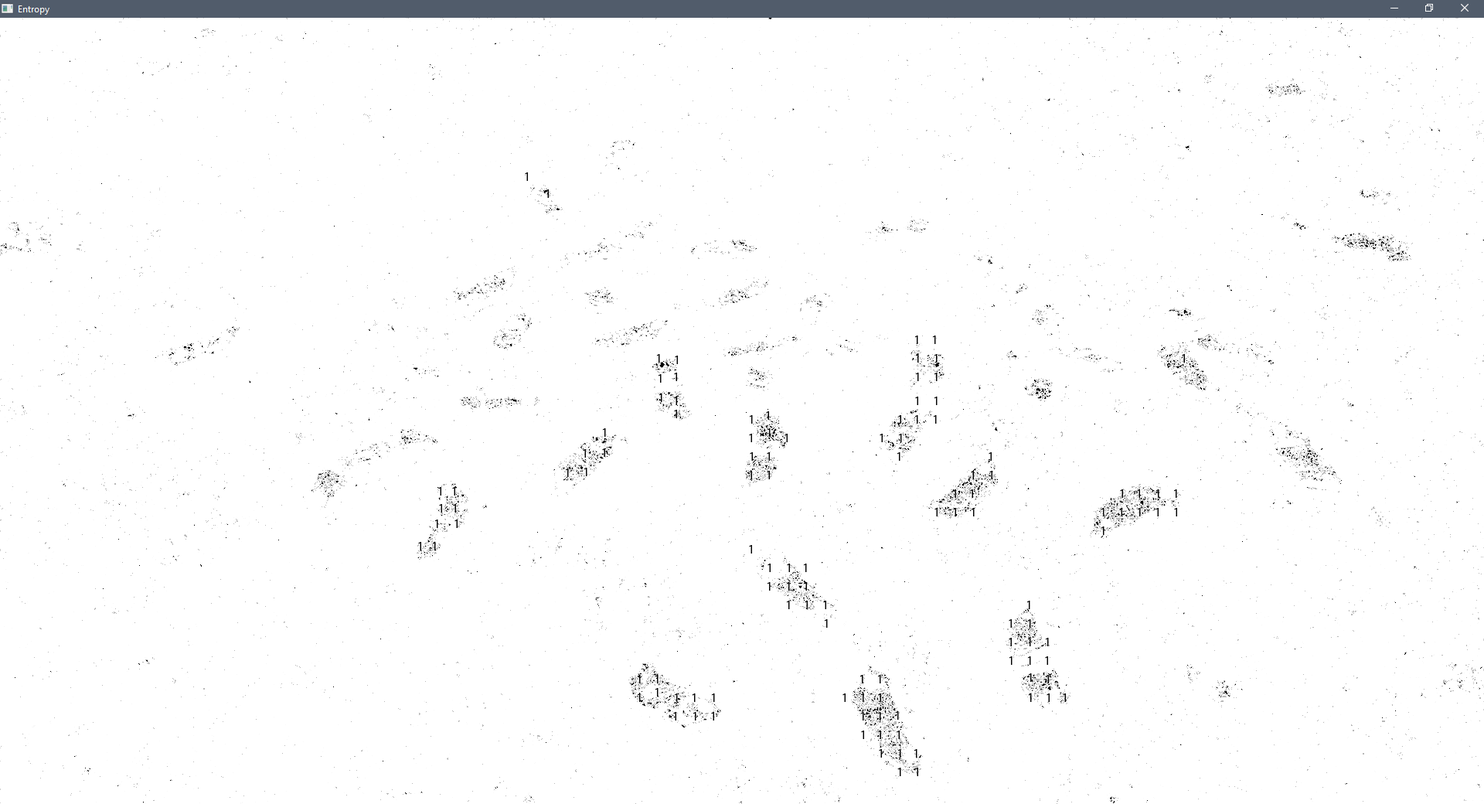
<style>
.page{position:relative;width:1484px;height:804px;background:#ffffff}
.page>*{position:absolute;margin:0}
.t1{font:12.4px "MyriadPro-Regular";color:#000000}
</style>
<div class="page">
<p class="t1" style="left:525px;top:172px;width:3px;height:9px">1</p>
<p class="t1" style="left:546px;top:189px;width:3px;height:9px">1</p>
<p class="t1" style="left:915px;top:335px;width:3px;height:9px">1</p>
<p class="t1" style="left:933px;top:335px;width:3px;height:9px">1</p>
<p class="t1" style="left:657px;top:354px;width:3px;height:8px">1</p>
<p class="t1" style="left:916px;top:354px;width:3px;height:8px">1</p>
<p class="t1" style="left:934px;top:354px;width:3px;height:8px">1</p>
<p class="t1" style="left:675px;top:355px;width:3px;height:9px">1</p>
<p class="t1" style="left:658px;top:374px;width:3px;height:9px">1</p>
<p class="t1" style="left:674px;top:372px;width:3px;height:9px">1</p>
<p class="t1" style="left:916px;top:372px;width:3px;height:9px">1</p>
<p class="t1" style="left:934px;top:372px;width:3px;height:9px">1</p>
<p class="t1" style="left:659px;top:393px;width:3px;height:9px">1</p>
<p class="t1" style="left:674px;top:396px;width:3px;height:9px">1</p>
<p class="t1" style="left:915px;top:396px;width:3px;height:9px">1</p>
<p class="t1" style="left:934px;top:396px;width:3px;height:9px">1</p>
<p class="t1" style="left:674px;top:410px;width:3px;height:8px">1</p>
<p class="t1" style="left:766px;top:411px;width:3px;height:9px">1</p>
<p class="t1" style="left:750px;top:415px;width:3px;height:8px">1</p>
<p class="t1" style="left:898px;top:415px;width:3px;height:8px">1</p>
<p class="t1" style="left:915px;top:415px;width:3px;height:8px">1</p>
<p class="t1" style="left:934px;top:415px;width:3px;height:8px">1</p>
<p class="t1" style="left:603px;top:428px;width:3px;height:9px">1</p>
<p class="t1" style="left:749px;top:434px;width:3px;height:8px">1</p>
<p class="t1" style="left:767px;top:428px;width:3px;height:9px">1</p>
<p class="t1" style="left:784px;top:434px;width:3px;height:8px">1</p>
<p class="t1" style="left:879px;top:434px;width:4px;height:8px">1</p>
<p class="t1" style="left:899px;top:434px;width:3px;height:8px">1</p>
<p class="t1" style="left:583px;top:449px;width:3px;height:8px">1</p>
<p class="t1" style="left:602px;top:448px;width:3px;height:9px">1</p>
<p class="t1" style="left:750px;top:452px;width:3px;height:9px">1</p>
<p class="t1" style="left:767px;top:452px;width:3px;height:9px">1</p>
<p class="t1" style="left:897px;top:452px;width:3px;height:9px">1</p>
<p class="t1" style="left:988px;top:452px;width:3px;height:9px">1</p>
<p class="t1" style="left:566px;top:468px;width:3px;height:9px">1</p>
<p class="t1" style="left:584px;top:468px;width:3px;height:8px">1</p>
<p class="t1" style="left:749px;top:471px;width:3px;height:8px">1</p>
<p class="t1" style="left:767px;top:471px;width:3px;height:8px">1</p>
<p class="t1" style="left:971px;top:471px;width:3px;height:8px">1</p>
<p class="t1" style="left:989px;top:471px;width:3px;height:8px">1</p>
<p class="t1" style="left:438px;top:487px;width:17px;height:8px">1   1</p>
<p class="t1" style="left:953px;top:489px;width:3px;height:9px">1</p>
<p class="t1" style="left:970px;top:489px;width:3px;height:9px">1</p>
<p class="t1" style="left:1120px;top:489px;width:3px;height:9px">1</p>
<p class="t1" style="left:1137px;top:489px;width:3px;height:9px">1</p>
<p class="t1" style="left:1156px;top:489px;width:3px;height:9px">1</p>
<p class="t1" style="left:1174px;top:489px;width:3px;height:9px">1</p>
<p class="t1" style="left:439px;top:504px;width:17px;height:8px">1   1</p>
<p class="t1" style="left:934px;top:508px;width:3px;height:8px">1</p>
<p class="t1" style="left:953px;top:508px;width:3px;height:8px">1</p>
<p class="t1" style="left:971px;top:508px;width:3px;height:8px">1</p>
<p class="t1" style="left:1101px;top:508px;width:3px;height:8px">1</p>
<p class="t1" style="left:1119px;top:508px;width:3px;height:8px">1</p>
<p class="t1" style="left:1138px;top:508px;width:3px;height:8px">1</p>
<p class="t1" style="left:1155px;top:508px;width:3px;height:8px">1</p>
<p class="t1" style="left:1174px;top:508px;width:3px;height:8px">1</p>
<p class="t1" style="left:435px;top:519px;width:22px;height:9px">1     1</p>
<p class="t1" style="left:1101px;top:526px;width:3px;height:9px">1</p>
<p class="t1" style="left:418px;top:542px;width:18px;height:8px">1   1</p>
<p class="t1" style="left:749px;top:545px;width:3px;height:8px">1</p>
<p class="t1" style="left:767px;top:563px;width:3px;height:9px">1</p>
<p class="t1" style="left:787px;top:563px;width:3px;height:9px">1</p>
<p class="t1" style="left:804px;top:563px;width:3px;height:9px">1</p>
<p class="t1" style="left:767px;top:582px;width:3px;height:8px">1</p>
<p class="t1" style="left:787px;top:582px;width:3px;height:8px">1</p>
<p class="t1" style="left:804px;top:582px;width:3px;height:8px">1</p>
<p class="t1" style="left:787px;top:600px;width:3px;height:9px">1</p>
<p class="t1" style="left:804px;top:600px;width:4px;height:9px">1</p>
<p class="t1" style="left:823px;top:600px;width:3px;height:9px">1</p>
<p class="t1" style="left:1027px;top:600px;width:3px;height:9px">1</p>
<p class="t1" style="left:825px;top:619px;width:3px;height:8px">1</p>
<p class="t1" style="left:1008px;top:619px;width:4px;height:8px">1</p>
<p class="t1" style="left:1028px;top:619px;width:3px;height:8px">1</p>
<p class="t1" style="left:1008px;top:638px;width:4px;height:8px">1</p>
<p class="t1" style="left:1028px;top:638px;width:3px;height:8px">1</p>
<p class="t1" style="left:1046px;top:638px;width:3px;height:8px">1</p>
<p class="t1" style="left:1009px;top:656px;width:3px;height:9px">1</p>
<p class="t1" style="left:1028px;top:656px;width:3px;height:9px">1</p>
<p class="t1" style="left:1045px;top:656px;width:3px;height:9px">1</p>
<p class="t1" style="left:638px;top:675px;width:3px;height:8px">1</p>
<p class="t1" style="left:655px;top:675px;width:3px;height:8px">1</p>
<p class="t1" style="left:860px;top:675px;width:3px;height:8px">1</p>
<p class="t1" style="left:878px;top:675px;width:3px;height:8px">1</p>
<p class="t1" style="left:1029px;top:673px;width:3px;height:9px">1</p>
<p class="t1" style="left:1046px;top:675px;width:3px;height:8px">1</p>
<p class="t1" style="left:655px;top:688px;width:3px;height:8px">1</p>
<p class="t1" style="left:638px;top:693px;width:3px;height:9px">1</p>
<p class="t1" style="left:675px;top:693px;width:3px;height:9px">1</p>
<p class="t1" style="left:692px;top:693px;width:3px;height:9px">1</p>
<p class="t1" style="left:712px;top:693px;width:3px;height:9px">1</p>
<p class="t1" style="left:842px;top:693px;width:3px;height:9px">1</p>
<p class="t1" style="left:861px;top:693px;width:3px;height:9px">1</p>
<p class="t1" style="left:878px;top:693px;width:3px;height:9px">1</p>
<p class="t1" style="left:1029px;top:693px;width:3px;height:9px">1</p>
<p class="t1" style="left:1046px;top:693px;width:3px;height:9px">1</p>
<p class="t1" style="left:1063px;top:693px;width:3px;height:9px">1</p>
<p class="t1" style="left:673px;top:712px;width:3px;height:8px">1</p>
<p class="t1" style="left:693px;top:712px;width:3px;height:8px">1</p>
<p class="t1" style="left:711px;top:712px;width:3px;height:8px">1</p>
<p class="t1" style="left:861px;top:712px;width:3px;height:8px">1</p>
<p class="t1" style="left:878px;top:712px;width:3px;height:8px">1</p>
<p class="t1" style="left:896px;top:711px;width:3px;height:8px">1</p>
<p class="t1" style="left:861px;top:730px;width:3px;height:9px">1</p>
<p class="t1" style="left:878px;top:730px;width:3px;height:9px">1</p>
<p class="t1" style="left:896px;top:730px;width:4px;height:9px">1</p>
<p class="t1" style="left:879px;top:749px;width:3px;height:8px">1</p>
<p class="t1" style="left:898px;top:749px;width:3px;height:8px">1</p>
<p class="t1" style="left:914px;top:749px;width:3px;height:8px">1</p>
<p class="t1" style="left:898px;top:767px;width:3px;height:9px">1</p>
<p class="t1" style="left:915px;top:767px;width:3px;height:9px">1</p>
</div>
